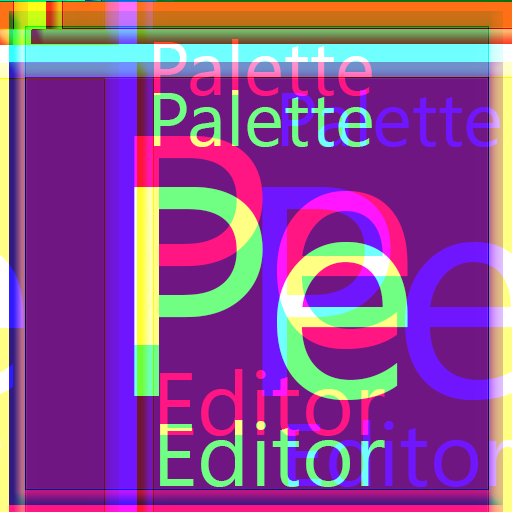
<style>
.page{position:relative;width:512px;height:512px;background:#701683}
.page>*{position:absolute;margin:0}
.t1{font:76px "SegoeUI"}
.t2{font:298.7px "SegoeUI"}
.t3{font:89.3px "SegoeUI"}
</style>
<div class="page">
<p class="t1" style="left:154px;top:37px;width:218px;height:57px">Palette</p>
<p class="t2" style="left:134px;top:134px;width:274px;height:213px">Pe</p>
<p class="t3" style="left:160px;top:367px;width:225px;height:67px">Editor</p>
</div>
